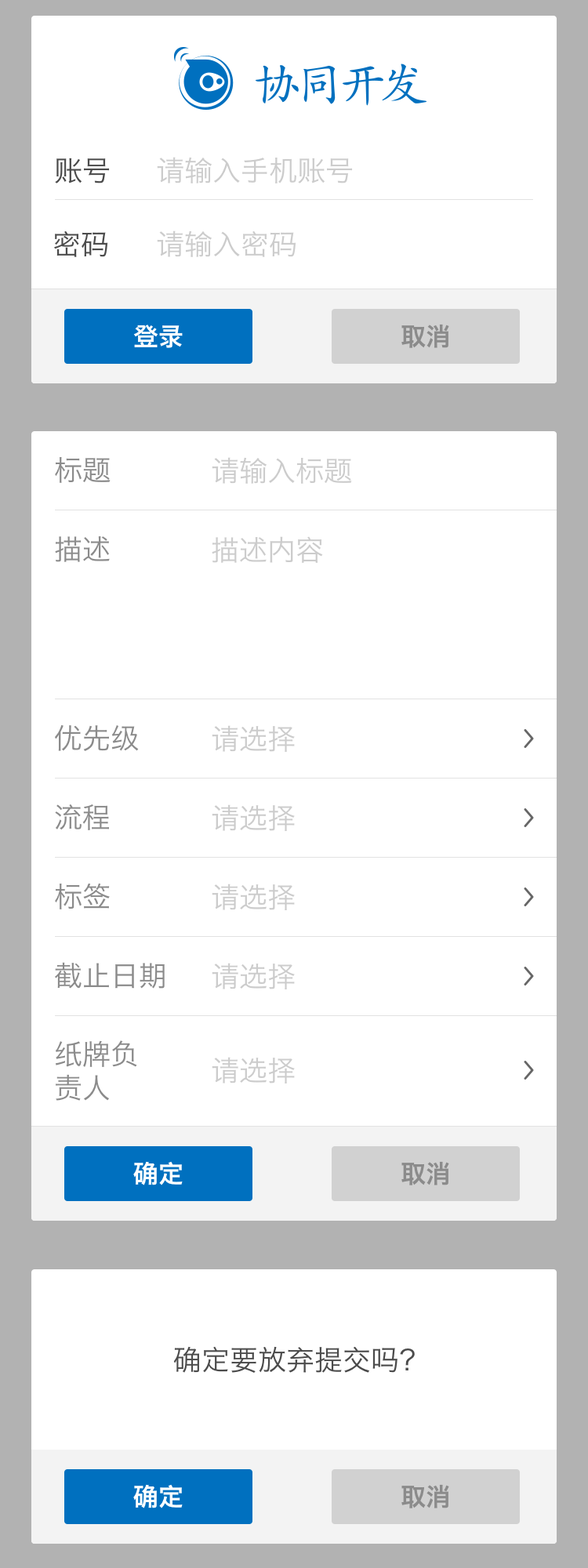
<style>
.page{position:relative;width:588px;height:1568px;background:#ffffff}
.page>*{position:absolute;margin:0}
.t1{font:28.2px "HiraginoSansGB-W3";color:#4b4b4b}
.t2{font:28.2px "HiraginoSansGB-W3";color:#cccccc}
.t3{font:25.1px "HiraginoSansGB-W6";color:#ffffff}
.t4{font:25.1px "HiraginoSansGB-W6";color:#8b8b8b}
.t5{font:28.2px "HiraginoSansGB-W3";color:#8b8b8b}
</style>
<div class="page">
<p class="t1" style="left:55px;top:158px;width:55px;height:25px">账号</p>
<p class="t2" style="left:157px;top:157px;width:196px;height:26px">请输入手机账号</p>
<p class="t1" style="left:54px;top:230px;width:54px;height:27px">密码</p>
<p class="t2" style="left:157px;top:230px;width:139px;height:27px">请输入密码</p>
<p class="t3" style="left:133px;top:325px;width:50px;height:23px">登录</p>
<p class="t4" style="left:401px;top:324px;width:48px;height:24px">取消</p>
<p class="t5" style="left:55px;top:457px;width:56px;height:26px">标题</p>
<p class="t2" style="left:212px;top:457px;width:140px;height:27px">请输入标题</p>
<p class="t5" style="left:55px;top:536px;width:55px;height:26px">描述</p>
<p class="t2" style="left:212px;top:536px;width:111px;height:27px">描述内容</p>
<p class="t5" style="left:55px;top:725px;width:84px;height:26px">优先级</p>
<p class="t2" style="left:212px;top:725px;width:83px;height:27px">请选择</p>
<p class="t5" style="left:55px;top:804px;width:54px;height:26px">流程</p>
<p class="t2" style="left:212px;top:804px;width:83px;height:27px">请选择</p>
<p class="t5" style="left:55px;top:883px;width:55px;height:26px">标签</p>
<p class="t2" style="left:212px;top:884px;width:83px;height:26px">请选择</p>
<p class="t5" style="left:55px;top:962px;width:110px;height:27px">截止日期</p>
<p class="t2" style="left:212px;top:963px;width:83px;height:26px">请选择</p>
<p class="t5" style="left:56px;top:1040px;width:81px;height:61px">纸牌负<br>责人</p>
<p class="t2" style="left:212px;top:1057px;width:83px;height:26px">请选择</p>
<p class="t3" style="left:133px;top:1161px;width:50px;height:24px">确定</p>
<p class="t4" style="left:401px;top:1161px;width:48px;height:24px">取消</p>
<p class="t1" style="left:173px;top:1346px;width:242px;height:27px">确定要放弃提交吗？</p>
<p class="t3" style="left:133px;top:1484px;width:50px;height:24px">确定</p>
<p class="t4" style="left:401px;top:1484px;width:48px;height:24px">取消</p>
</div>
